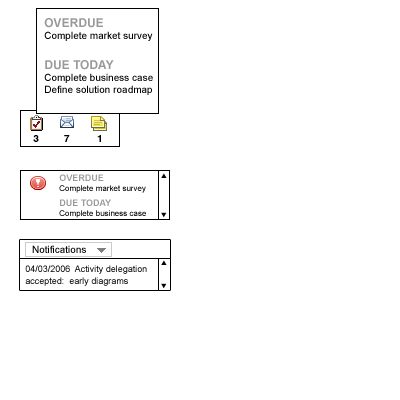
<style>
.page{position:relative;width:400px;height:400px;background:#ffffff}
.page>*{position:absolute;margin:0}
.t1{font:10px/12px "ArialMT";color:#000000}
.t2{font:12px/12px "Arial-BoldMT";color:#999999}
.t3{font:10px "Helvetica-Bold";color:#000000}
.t4{font:8px/10px "ArialMT";color:#000000}
.t5{font:9px/10px "Arial-BoldMT";color:#999999}
.t6{font:9px/12px "ArialMT";color:#000000}
</style>
<div class="page">
<p class="t1" style="left:44px;top:18px;width:109px;height:77px"><span class="t2">OVERDUE</span><br>Complete market survey<br><br><span class="t2">DUE TODAY<br></span>Complete business case<br>Define solution roadmap</p>
<p class="t3" style="left:33px;top:135px;width:68px;height:7px">3         7          1</p>
<p class="t4" style="left:59px;top:174px;width:87px;height:44px"><span class="t5">OVERDUE<br></span>Complete market survey<br><br><span class="t5">DUE TODAY<br></span>Complete business case</p>
<p class="t6" style="left:25px;top:265px;width:122px;height:21px"><span class="t2"><br></span>04/03/2006  Activity delegation <br>accepted:  early diagrams</p>
</div>
